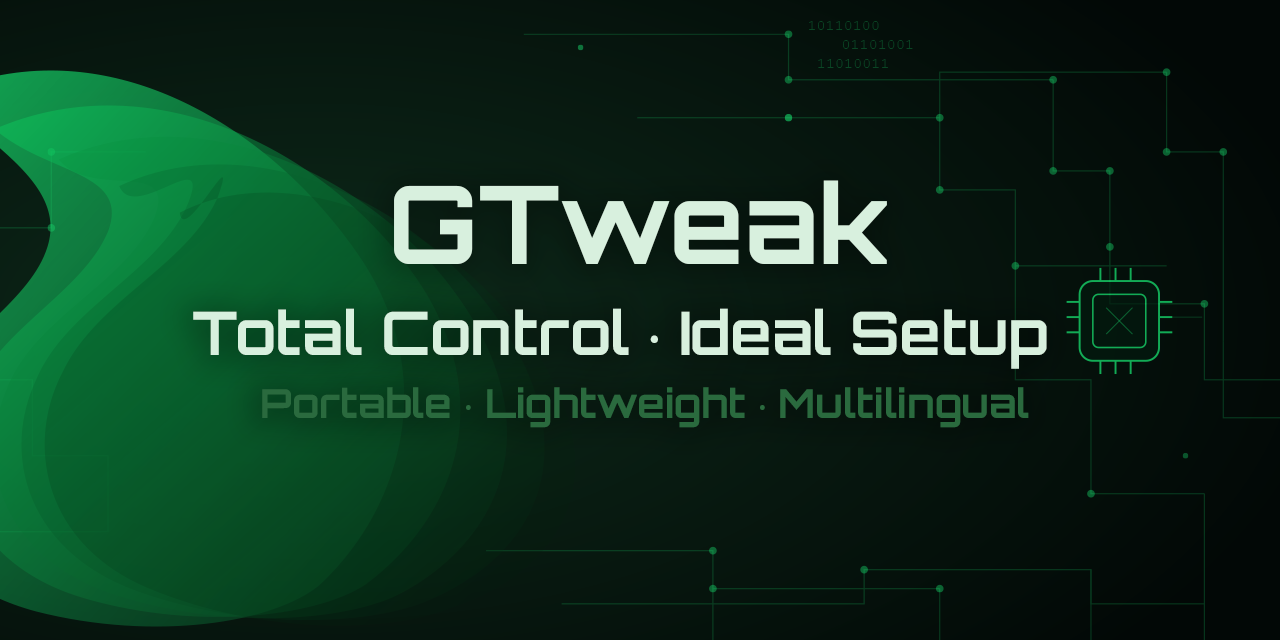
<style>
.page{position:relative;width:1280px;height:640px}
.page>*{position:absolute;margin:0}
.t1{font:108.4px "Orbitron-Bold";color:#d8f0de}
.t2{font:60px "Orbitron-Bold";color:#d8f0de}
.t3{font:60px "MyriadPro-Regular";color:#d8f0de}
.t4{font:40px "Orbitron-Bold";color:#2a6a3e}
.t5{font:40px "MyriadPro-Regular";color:#2a6a3e}
</style>
<div class="page">
<p class="t1" style="left:394px;top:180px;width:493px;height:84px">GTweak</p>
<p class="t2" style="left:193px;top:308px;width:854px;height:61px">Total Control <span class="t3">·</span> Ideal Setup</p>
<p class="t4" style="left:262px;top:387px;width:767px;height:41px">Portable <span class="t5">·</span> Lightweight <span class="t5">·</span> Multilingual</p>
</div>
